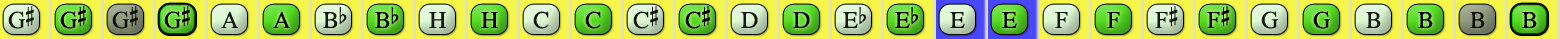
<style>
.page{position:relative;width:1560px;height:39px;background:#f6f649}
.page>*{position:absolute;margin:0}
.t1{font:24px "OpusChords";letter-spacing:-0.025em;color:#000000}
.t2{font:24px "OpusChords";color:#000000}
</style>
<div class="page">
<p class="t1" style="left:8px;top:6px;width:26px;height:23px;opacity:0.9">G#</p>
<p class="t1" style="left:60px;top:6px;width:26px;height:23px">G#</p>
<p class="t1" style="left:112px;top:6px;width:26px;height:23px;opacity:0.9">G#</p>
<p class="t1" style="left:164px;top:6px;width:26px;height:23px">G#</p>
<p class="t2" style="left:633px;top:6px;width:25px;height:23px;opacity:0.9">C#</p>
<p class="t2" style="left:685px;top:6px;width:25px;height:23px">C#</p>
<p class="t2" style="left:1155px;top:6px;width:23px;height:22px;opacity:0.9">F#</p>
<p class="t2" style="left:1207px;top:6px;width:23px;height:22px">F#</p>
<p class="t2" style="left:221px;top:11px;width:17px;height:17px;opacity:0.9">A</p>
<p class="t2" style="left:273px;top:11px;width:17px;height:17px">A</p>
<p class="t2" style="left:323px;top:7px;width:24px;height:21px;opacity:0.9">Bb</p>
<p class="t2" style="left:375px;top:7px;width:24px;height:21px">Bb</p>
<p class="t2" style="left:429px;top:12px;width:17px;height:16px;opacity:0.9">H</p>
<p class="t2" style="left:481px;top:12px;width:17px;height:16px">H</p>
<p class="t2" style="left:533px;top:11px;width:16px;height:18px;opacity:0.9">C</p>
<p class="t2" style="left:585px;top:11px;width:16px;height:18px">C</p>
<p class="t2" style="left:741px;top:12px;width:17px;height:16px;opacity:0.9">D</p>
<p class="t2" style="left:793px;top:12px;width:17px;height:16px">D</p>
<p class="t2" style="left:843px;top:7px;width:24px;height:21px;opacity:0.9">Eb</p>
<p class="t2" style="left:895px;top:7px;width:24px;height:21px">Eb</p>
<p class="t2" style="left:950px;top:12px;width:15px;height:16px;opacity:0.9">E</p>
<p class="t2" style="left:1002px;top:12px;width:15px;height:16px">E</p>
<p class="t2" style="left:1055px;top:12px;width:13px;height:16px;opacity:0.9">F</p>
<p class="t2" style="left:1107px;top:12px;width:13px;height:16px">F</p>
<p class="t2" style="left:1261px;top:11px;width:17px;height:18px;opacity:0.9">G</p>
<p class="t2" style="left:1313px;top:11px;width:17px;height:18px">G</p>
<p class="t2" style="left:1366px;top:12px;width:15px;height:16px;opacity:0.9">B</p>
<p class="t2" style="left:1418px;top:12px;width:15px;height:16px">B</p>
<p class="t2" style="left:1470px;top:12px;width:15px;height:16px;opacity:0.9">B</p>
<p class="t2" style="left:1522px;top:12px;width:15px;height:16px">B</p>
</div>
